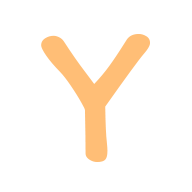
<style>
.page{position:relative;width:192px;height:192px;background:#ffffff}
.page>*{position:absolute;margin:0}
.t1{font:200px "Itim-Regular";color:#ffbe76}
</style>
<div class="page">
<p class="t1" style="left:41px;top:34px;width:109px;height:128px">Y</p>
</div>
